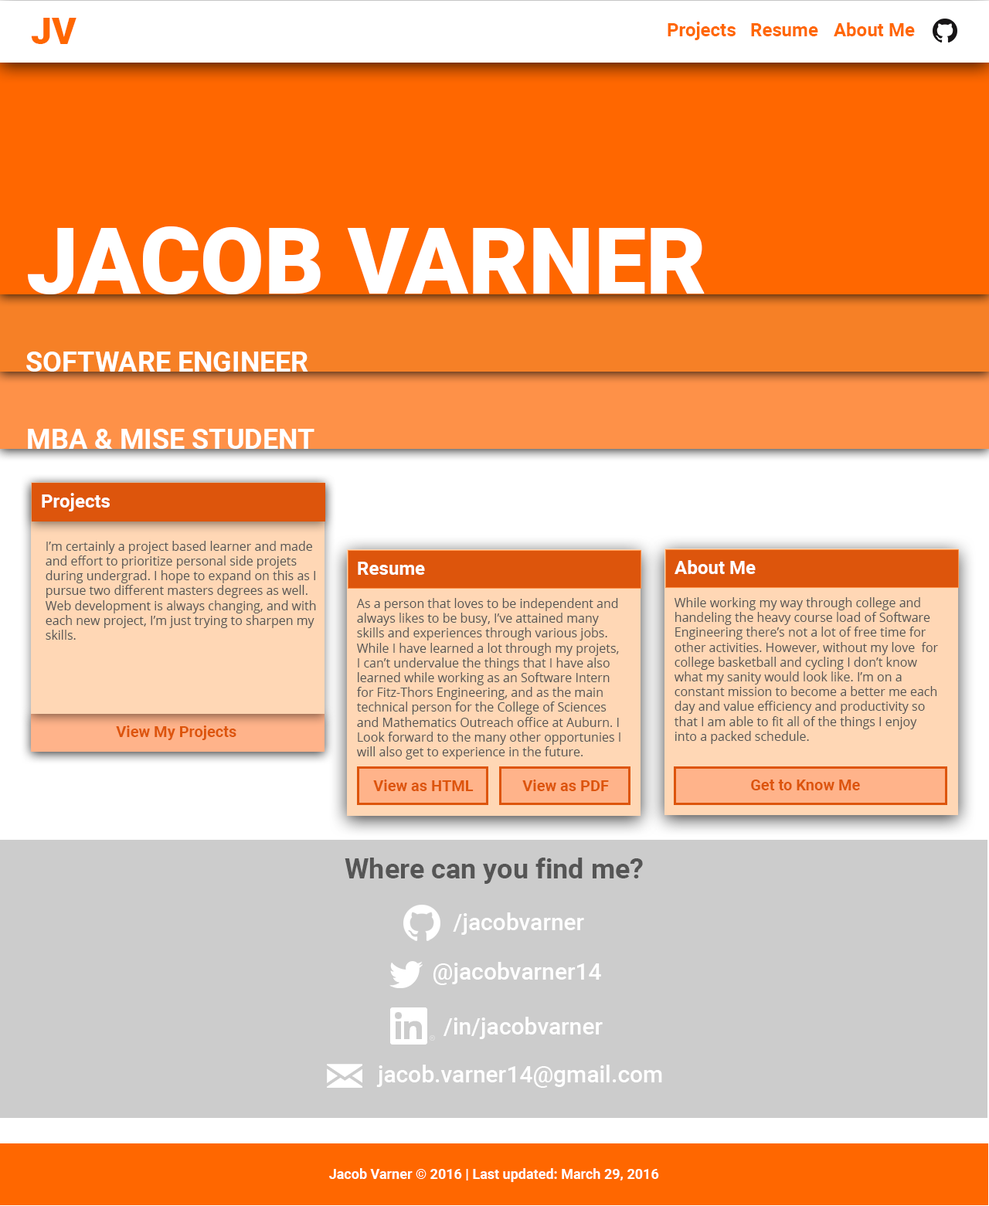
<style>
.page{position:relative;width:989px;height:1206px;background:#cccccc}
.page>*{position:absolute;margin:0}
.t1{font:37.1px "Roboto-Black";color:#ff6700}
.t2{font:18.5px "Roboto-Bold";color:#ff6700}
.t3{font:92.7px "Roboto-Black";color:#ffffff;text-transform:uppercase}
.t4{font:27.8px "Roboto-Bold";color:#ffffff;text-transform:uppercase}
.t5{font:18.5px "Roboto-Bold";color:#ffffff}
.t6{font:12.4px "OpenSans";color:#555555}
.t7{font:15.5px "Roboto-Bold";color:#dd550c}
.t8{font:27.8px "Roboto-Bold";color:#555555}
.t9{font:23.2px "Roboto-Medium";color:#ffffff}
.t10{font:13.9px "Roboto-Bold";color:#ffffff}
</style>
<div class="page">
<p class="t1" style="left:31px;top:18px;width:45px;height:26px">JV</p>
<p class="t2" style="left:667px;top:22px;width:248px;height:18px">Projects Resume About Me</p>
<p class="t3" style="left:28px;top:226px;width:677px;height:68px">Jacob Varner</p>
<p class="t4" style="left:26px;top:351px;width:282px;height:21px">Software Engineer</p>
<p class="t4" style="left:28px;top:429px;width:286px;height:20px">MBA &amp; MISE Student</p>
<p class="t5" style="left:42px;top:493px;width:68px;height:18px">Projects</p>
<p class="t6" style="left:46px;top:541px;width:270px;height:99px">I’m certainly a project based learner and made<br>and effort to prioritize personal side projets<br>during undergrad. I hope to expand on this as I<br>pursue two different masters degrees as well.<br>Web development is always changing, and with<br>each new project, I’m just trying to sharpen my<br>skills.</p>
<p class="t5" style="left:358px;top:562px;width:67px;height:13px">Resume</p>
<p class="t5" style="left:674px;top:560px;width:82px;height:14px">About Me</p>
<p class="t6" style="left:356px;top:598px;width:264px;height:161px">As a person that loves to be independent and<br>always likes to be busy, I’ve attained many<br>skills and experiences through various jobs.<br>While I have learned a lot through my projets,<br>I can’t undervalue the things that I have also<br>learned while working as an Software Intern<br>for Fitz-Thors Engineering, and as the main<br>technical person for the College of Sciences<br>and Mathematics Outreach office at Auburn. I<br>Look forward to the many other opportunies I<br>will also get to experience in the future.</p>
<p class="t6" style="left:674px;top:597px;width:264px;height:147px">While working my way through college and<br>handeling the heavy course load of Software<br>Engineering there’s not a lot of free time for<br>other activities. However, without my love  for<br>college basketball and cycling I don’t know<br>what my sanity would look like. I’m on a<br>constant mission to become a better me each<br>day and value efficiency and productivity so<br>that I am able to fit all of the things I enjoy<br>into a packed schedule.</p>
<p class="t7" style="left:116px;top:725px;width:120px;height:15px">View My Projects</p>
<p class="t7" style="left:373px;top:779px;width:101px;height:12px">View as HTML</p>
<p class="t7" style="left:522px;top:779px;width:87px;height:12px">View as PDF</p>
<p class="t7" style="left:751px;top:779px;width:109px;height:11px">Get to Know Me</p>
<p class="t8" style="left:345px;top:857px;width:298px;height:27px">Where can you find me?</p>
<p class="t9" style="left:453px;top:912px;width:131px;height:23px">/jacobvarner</p>
<p class="t9" style="left:433px;top:962px;width:168px;height:23px">@jacobvarner14</p>
<p class="t9" style="left:443px;top:1017px;width:160px;height:22px">/in/jacobvarner</p>
<p class="t9" style="left:376px;top:1065px;width:286px;height:23px">jacob.varner14@gmail.com</p>
<p class="t10" style="left:329px;top:1168px;width:330px;height:14px">Jacob Varner © 2016 | Last updated: March 29, 2016</p>
</div>
